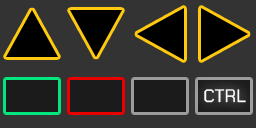
<style>
.page{position:relative;width:256px;height:128px;background:#333333}
.page>*{position:absolute;margin:0}
.t1{font:18px "ChakraPetch-Regular";color:#ffffff}
</style>
<div class="page">
<p class="t1" style="left:204px;top:89px;width:42px;height:14px">CTRL</p>
</div>
